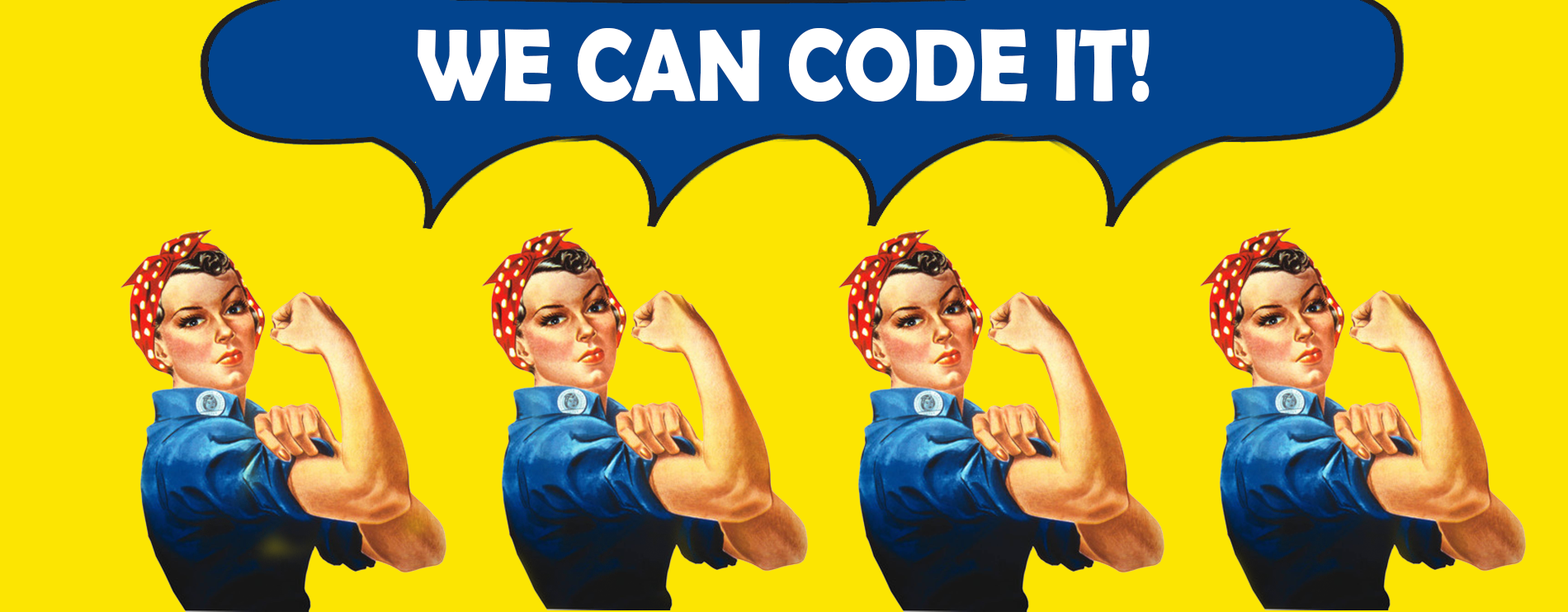
<style>
.page{position:relative;width:1568px;height:612px;background:#fce502}
.page>*{position:absolute;margin:0}
.t1{font:104px "BerlinSansFBDemi-Bold";color:#ffffff;scale:0.88 1}
</style>
<div class="page">
<p class="t1" style="left:418px;top:28px;width:732px;height:74px">WE CAN CODE IT!</p>
</div>
